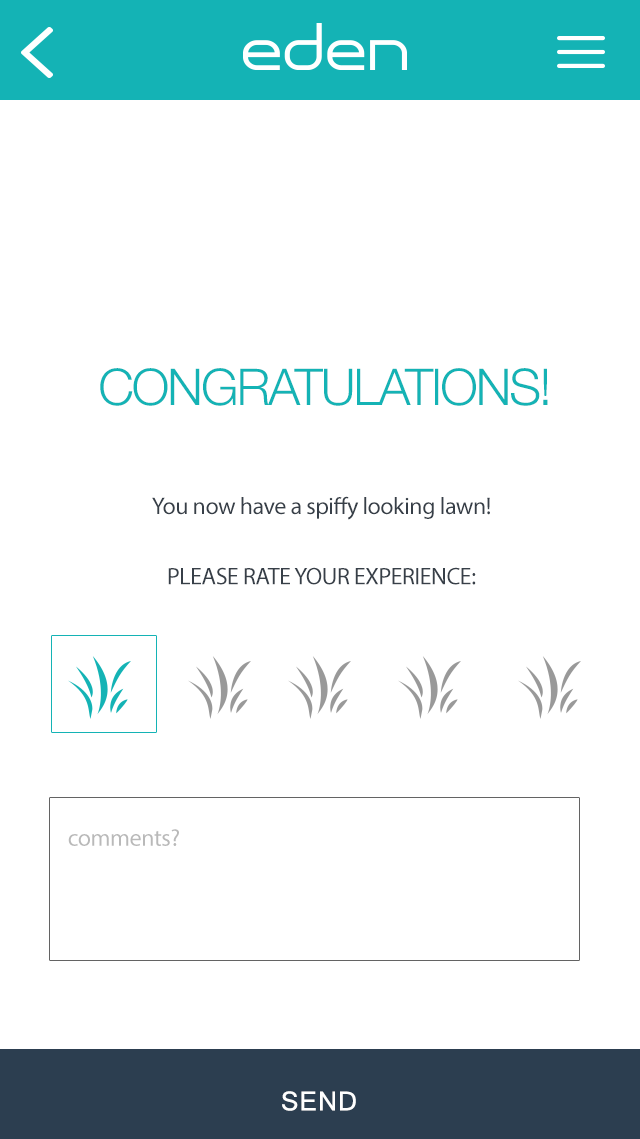
<style>
.page{position:relative;width:640px;height:1139px;background:#ffffff}
.page>*{position:absolute;margin:0}
.t1{font:50.6px "HelveticaNeue-Light";letter-spacing:-0.04em;color:#14b3b5}
.t2{font:24px/35.2px "MyriadPro-Regular";letter-spacing:-0.02em;color:#373f48}
.t3{font:24px "MyriadPro-Regular";letter-spacing:-0.02em;color:#b9b9b9}
.t4{font:26px "MicrosoftSansSerif";letter-spacing:0.04em;color:#ffffff}
</style>
<div class="page">
<p class="t1" style="left:100px;top:368px;width:448px;height:38px">CONGRATULATIONS!</p>
<p class="t2" style="left:152px;top:496px;width:338px;height:89px;text-align:center">You now have a spiffy looking lawn!<br><br>PLEASE RATE YOUR EXPERIENCE:</p>
<p class="t3" style="left:68px;top:829px;width:111px;height:17px">comments?</p>
<p class="t4" style="left:282px;top:1091px;width:74px;height:20px">SEND</p>
</div>
